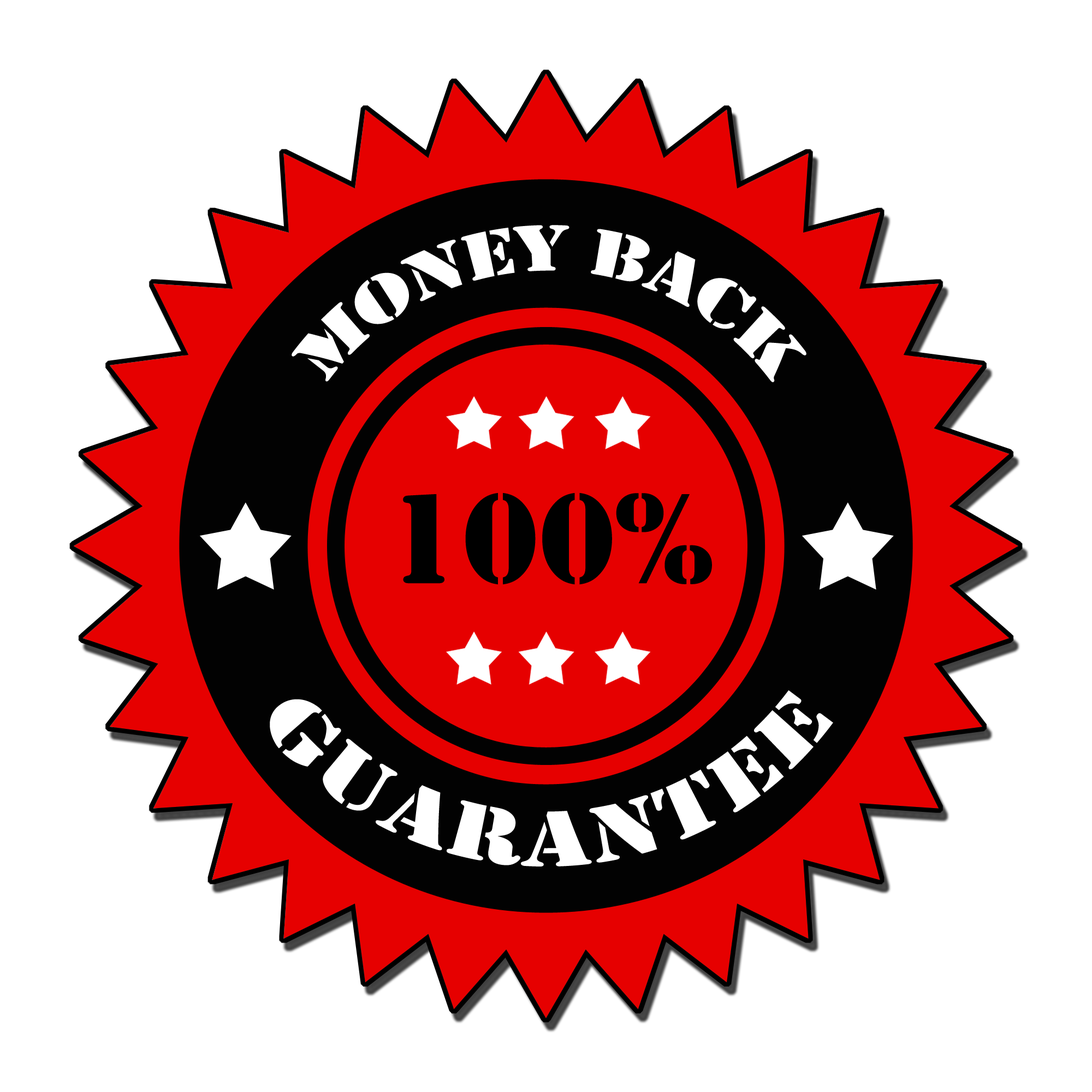
<style>
.page{position:relative;width:1092px;height:1092px;background:#ffffff}
.page>*{position:absolute;margin:0}
.t1{font:68.2px "Stencil";color:#ffffff}
.t2{font:133.6px "Stencil";color:#000000}
.t3{font:82.4px "Stencil";color:#ffffff}
</style>
<div class="page">
<p class="t1" style="left:292px;top:225px;width:514px;height:157px">MONEY BACK</p>
<p class="t2" style="left:403px;top:492px;width:309px;height:93px">100%</p>
<p class="t3" style="left:270px;top:690px;width:563px;height:176px">GUARANTEE</p>
</div>
